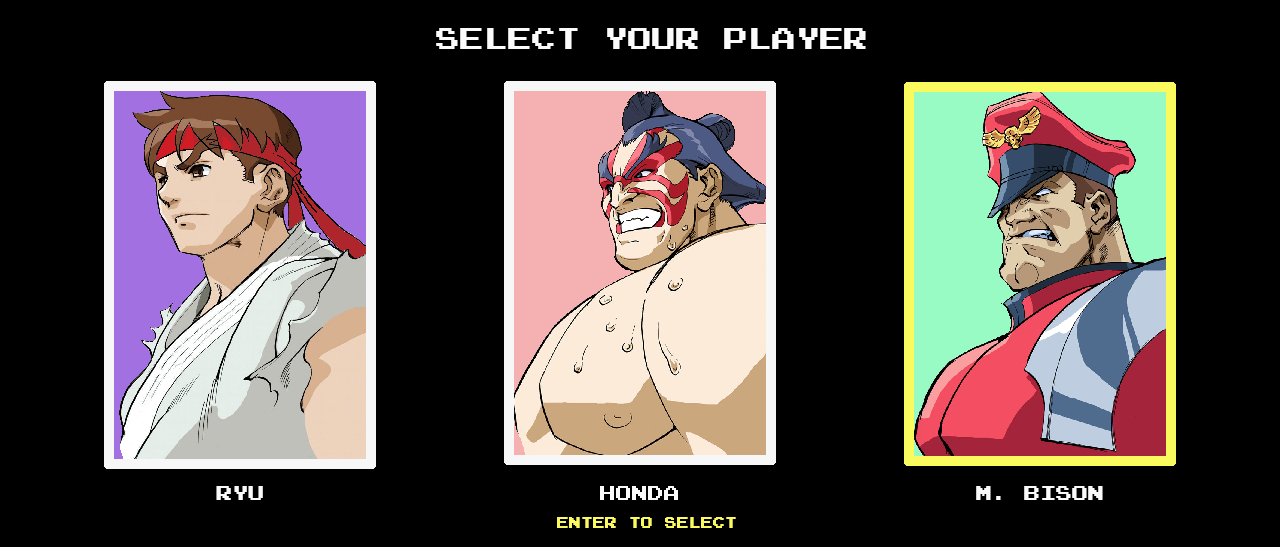
<style>
.page{position:relative;width:1280px;height:547px;background:#000000}
.page>*{position:absolute;margin:0}
.t1{font:24px "PressStart2P";color:#fbfbfb}
.t2{font:16px "PressStart2P";color:#fafafa}
.t3{font:12px "PressStart2P";color:#faf95d}
</style>
<div class="page">
<p class="t1" style="left:436px;top:28px;width:430px;height:21px">SELECT YOUR PLAYER</p>
<p class="t2" style="left:216px;top:486px;width:47px;height:14px">RYU</p>
<p class="t2" style="left:600px;top:486px;width:78px;height:14px">HONDA</p>
<p class="t2" style="left:976px;top:486px;width:127px;height:14px">M. BISON</p>
<p class="t3" style="left:557px;top:517px;width:179px;height:11px">ENTER TO SELECT</p>
</div>
